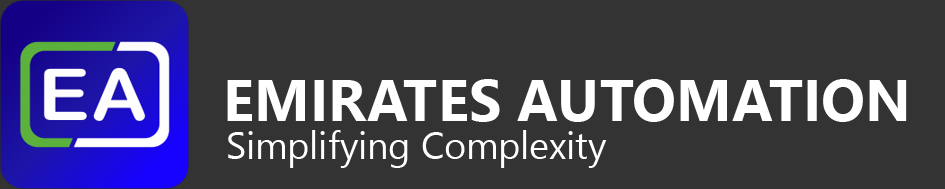
<style>
.page{position:relative;width:945px;height:189px;background:#333333}
.page>*{position:absolute;margin:0}
.t1{font:58.3px "LeelawadeeUI-Bold";color:#ffffff}
.t2{font:37.5px "LeelawadeeUI";color:#ffffff}
</style>
<div class="page">
<p class="t1" style="left:227px;top:79px;width:680px;height:43px">EMIRATES AUTOMATION</p>
<p class="t2" style="left:228px;top:130px;width:379px;height:38px">Simplifying Complexity</p>
</div>
